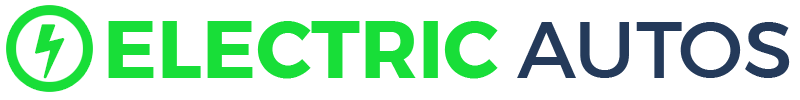
<style>
.page{position:relative;width:800px;height:100px;background:#ffffff}
.page>*{position:absolute;margin:0}
.t1{font:80px "Montserrat-Bold";color:#18de38}
.t2{font:80px "Montserrat-Regular";color:#243a5a}
</style>
<div class="page">
<p class="t1" style="left:108px;top:21px;width:682px;height:58px">ELECTRIC <span class="t2">AUTOS</span></p>
</div>
